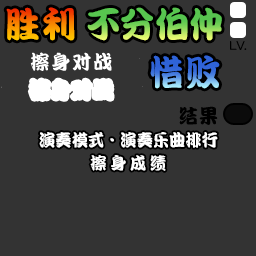
<style>
.page{position:relative;width:256px;height:256px;background:#333333}
.page>*{position:absolute;margin:0}
.t1{font:36px "DFPKanTingLiuW9";letter-spacing:0.09em;scale:0.96 1}
.t2{font:36px "DFPKanTingLiuW9";scale:0.96 1}
.t3{font:20px "DFPKanTingLiuW9";letter-spacing:0.09em;color:#ffffff;scale:0.96 1}
.t4{font:20px "DFPKanTingLiuW9";letter-spacing:0.05em;color:#000000;scale:0.96 1}
.t5{font:17px "DFPKanTingLiuW9";color:#ffffff;scale:0.96 1}
.t6{font:17px "DFPKanTingLiuW9";letter-spacing:0.22em;color:#ffffff;scale:0.96 1}
</style>
<div class="page">
<p class="t1" style="left:6px;top:7px;width:69px;height:34px">胜利</p>
<p class="t2" style="left:87px;top:7px;width:135px;height:34px">不分伯仲</p>
<p class="t3" style="left:30px;top:52px;width:82px;height:19px">擦身对战</p>
<p class="t1" style="left:150px;top:55px;width:70px;height:34px">惜败</p>
<p class="t4" style="left:179px;top:106px;width:39px;height:19px">结果</p>
<p class="t5" style="left:39px;top:132px;width:179px;height:16px">演奏模式·演奏乐曲排行</p>
<p class="t6" style="left:90px;top:155px;width:76px;height:16px">擦身成绩</p>
</div>
